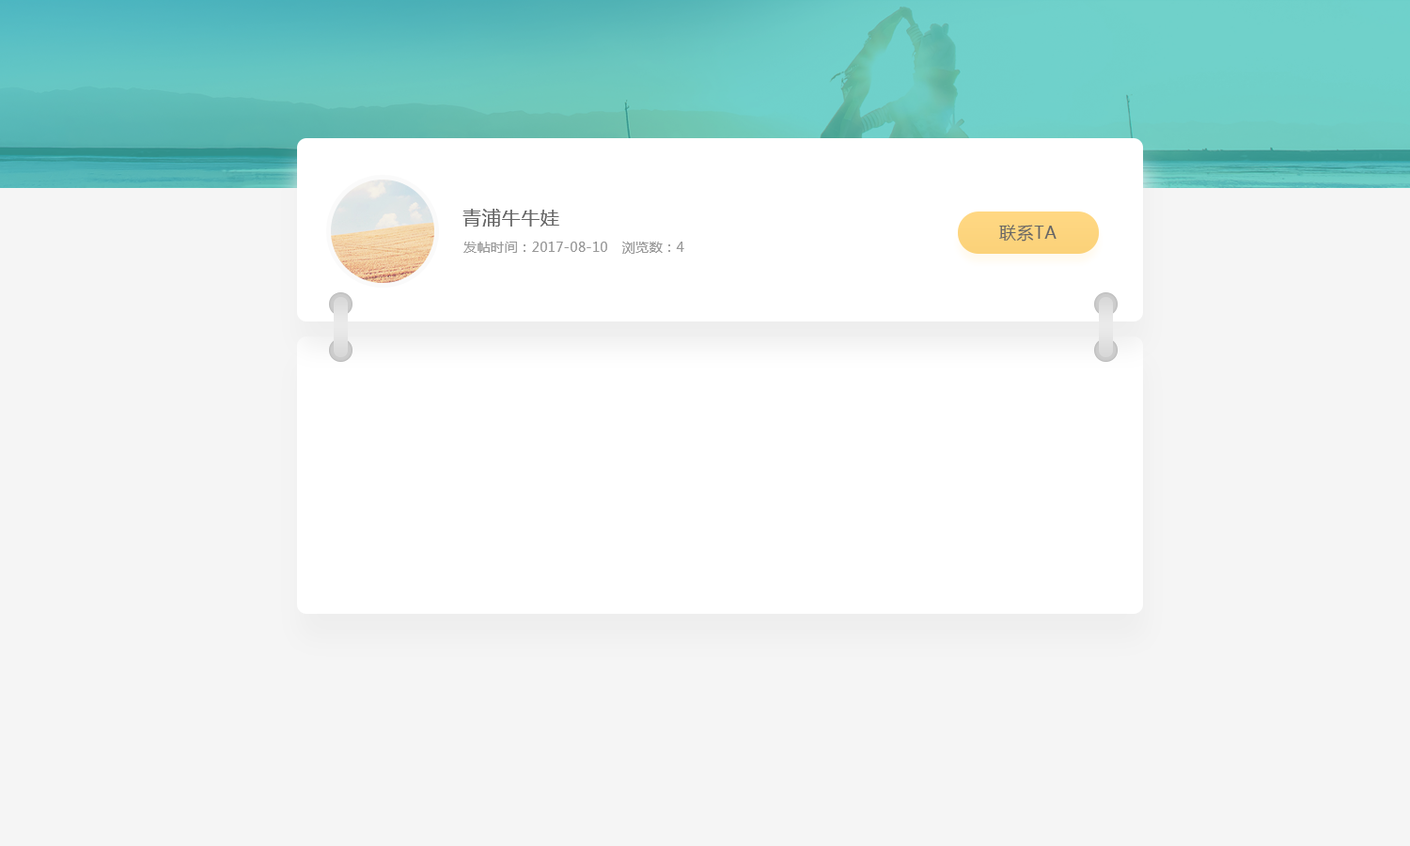
<style>
.page{position:relative;width:1410px;height:846px;background:#f5f5f5}
.page>*{position:absolute;margin:0}
.t1{font:18.8px "MicrosoftYaHei";letter-spacing:0.038em;color:#666666}
.t2{font:16.9px "MicrosoftYaHei";letter-spacing:0.038em;color:#666666}
.t3{font:13.2px "MicrosoftYaHei";letter-spacing:0.038em;color:#999999}
</style>
<div class="page">
<p class="t1" style="left:462px;top:209px;width:97px;height:17px">青浦牛牛娃</p>
<p class="t2" style="left:999px;top:225px;width:57px;height:17px">联系TA</p>
<p class="t3" style="left:463px;top:242px;width:221px;height:12px">发帖时间：2017-08-10　浏览数：4</p>
</div>
